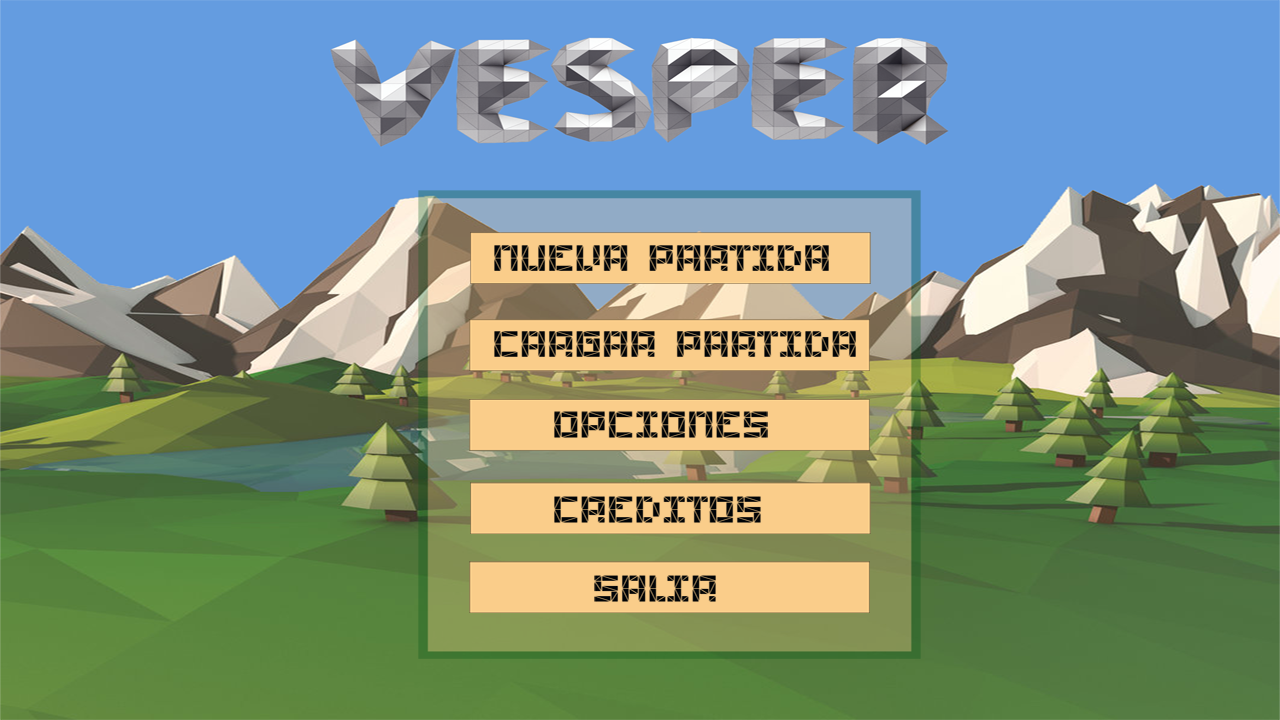
<style>
.page{position:relative;width:1280px;height:720px;background:#649ce0}
.page>*{position:absolute;margin:0}
.t1{font:36.3px "Polygon-Regular";color:#000306;scale:1.26 1}
</style>
<div class="page">
<p class="t1" style="left:494px;top:245px;width:335px;height:26px">NUEVA PARTIDA</p>
<p class="t1" style="left:494px;top:331px;width:362px;height:26px">CARGAR PARTIDA</p>
<p class="t1" style="left:554px;top:411px;width:214px;height:27px">OPCIONES</p>
<p class="t1" style="left:554px;top:496px;width:207px;height:27px">CREDITOS</p>
<p class="t1" style="left:594px;top:575px;width:122px;height:27px">SALIR</p>
</div>
